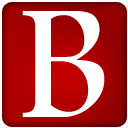
<style>
.page{position:relative;width:128px;height:128px;background:#ffffff}
.page>*{position:absolute;margin:0}
.t1{font:170px "FootlightMTLight";letter-spacing:-0.05em;color:#ffffff}
</style>
<div class="page">
<p class="t1" style="left:22px;top:11px;width:83px;height:106px">B</p>
</div>
